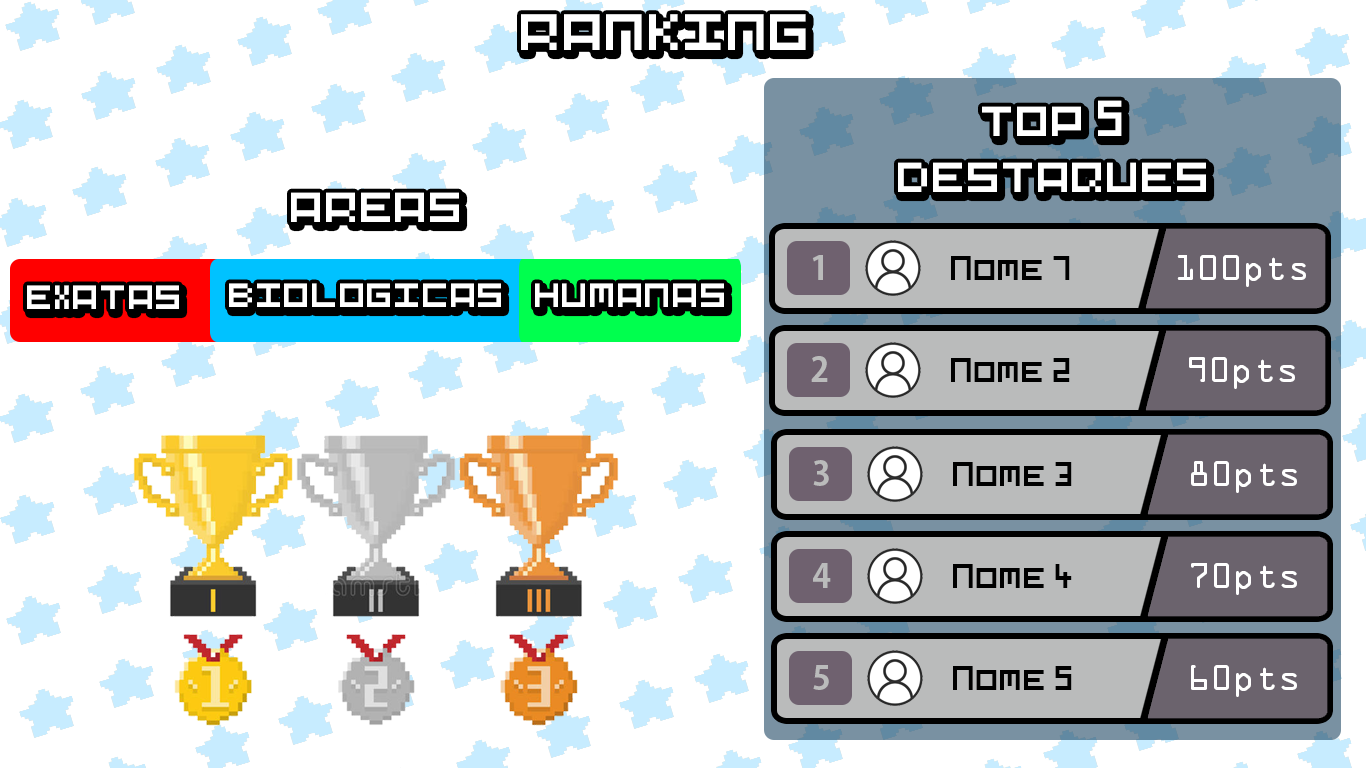
<style>
.page{position:relative;width:1366px;height:768px;background:#ffffff}
.page>*{position:absolute;margin:0}
.t1{font:57.1px "Pixel-Art";color:#ffffff}
.t2{font:46.9px "Pixel-Art";color:#ffffff}
.t3{font:32.9px "AdobeGothicStd-Bold";color:#babbbb}
.t4{font:32px "Pixel-Art";color:#000000}
.t5{font:32px "OCRAStd";color:#ffffff}
.t6{font:37.7px "Pixel-Art";color:#ffffff}
</style>
<div class="page">
<p class="t1" style="left:521px;top:14px;width:285px;height:36px">ranking</p>
<p class="t2" style="left:898px;top:100px;width:308px;height:92px;text-align:center">top 5<br>destaques</p>
<p class="t2" style="left:291px;top:192px;width:168px;height:30px">areas</p>
<p class="t3" style="left:812px;top:255px;width:11px;height:25px">1</p>
<p class="t4" style="left:951px;top:256px;width:119px;height:24px">Nome 1</p>
<p class="t5" style="left:1177px;top:255px;width:129px;height:32px">100pts</p>
<p class="t6" style="left:27px;top:285px;width:152px;height:24px">exatas</p>
<p class="t6" style="left:229px;top:283px;width:272px;height:24px">biologicas</p>
<p class="t6" style="left:535px;top:283px;width:189px;height:24px">humanas</p>
<p class="t3" style="left:811px;top:356px;width:17px;height:26px">2</p>
<p class="t4" style="left:951px;top:358px;width:119px;height:24px">Nome 2</p>
<p class="t5" style="left:1189px;top:357px;width:106px;height:32px">90pts</p>
<p class="t3" style="left:813px;top:460px;width:16px;height:26px">3</p>
<p class="t4" style="left:953px;top:462px;width:119px;height:24px">Nome 3</p>
<p class="t5" style="left:1191px;top:461px;width:106px;height:32px">80pts</p>
<p class="t3" style="left:813px;top:563px;width:18px;height:25px">4</p>
<p class="t4" style="left:953px;top:564px;width:119px;height:24px">Nome 4</p>
<p class="t5" style="left:1191px;top:563px;width:106px;height:32px">70pts</p>
<p class="t3" style="left:813px;top:665px;width:16px;height:25px">5</p>
<p class="t5" style="left:1191px;top:665px;width:106px;height:32px">60pts</p>
<p class="t4" style="left:953px;top:666px;width:119px;height:24px">Nome 5</p>
</div>
